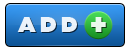
<style>
.page{position:relative;width:130px;height:50px}
.page>*{position:absolute;margin:0}
.t1{font:22px "GothamUltra";letter-spacing:0.205em;color:#ffffff;text-transform:uppercase}
.t2{font:28px "GothamUltra";letter-spacing:0.52em;color:#ffffff;text-transform:uppercase}
</style>
<div class="page">
<p class="t1" style="left:17px;top:17px;width:60px;height:15px;opacity:0.9">ADD</p>
<p class="t2" style="left:91px;top:17px;width:15px;height:15px;opacity:0.9">+</p>
</div>
